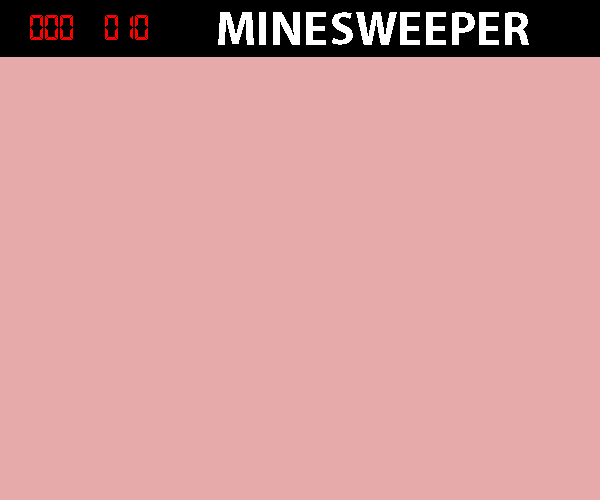
<style>
.page{position:relative;width:600px;height:500px;background:#e7aaaa}
.page>*{position:absolute;margin:0}
.t1{font:48px "MyriadPro-Bold";color:#ffffff}
</style>
<div class="page">
<p class="t1" style="left:218px;top:12px;width:311px;height:33px">MINESWEEPER</p>
</div>
